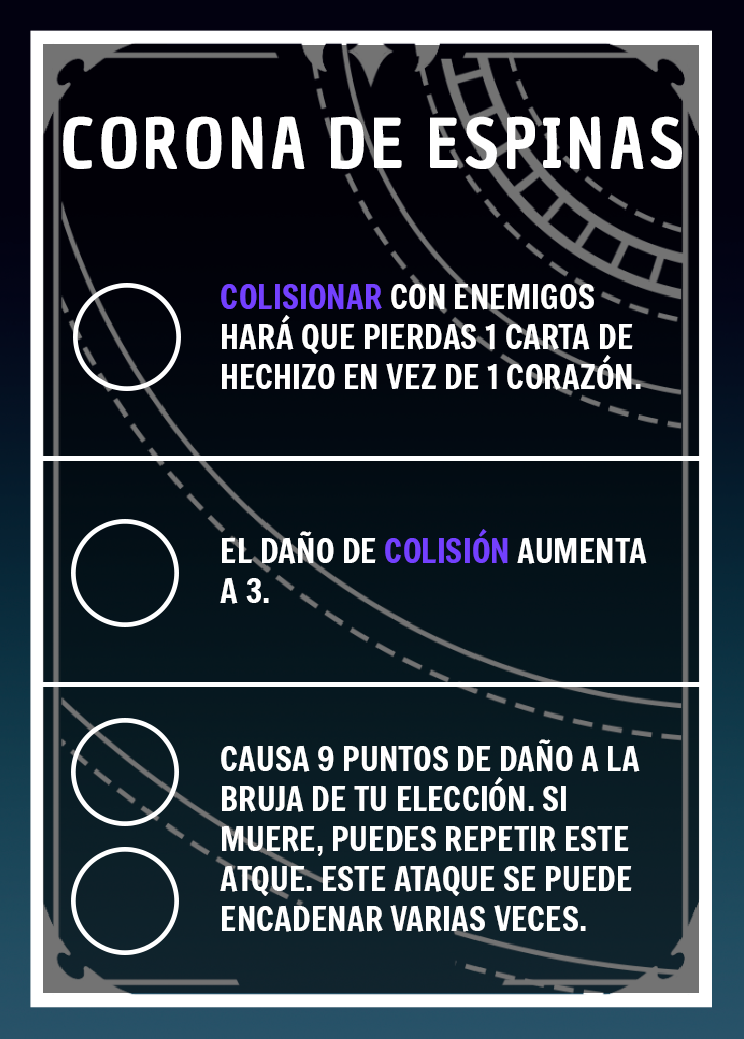
<style>
.page{position:relative;width:744px;height:1039px}
.page>*{position:absolute;margin:0}
.t1{font:66.7px "ChauPhilomeneOne-Regular";letter-spacing:0.075em;color:#ffffff}
.t2{font:33.3px "Freeman-Regular";color:#ffffff}
.t3{font:33.3px "Freeman-Regular";color:#7340ff}
</style>
<div class="page">
<p class="t1" style="left:63px;top:116px;width:619px;height:53px">CORONA DE ESPINAS</p>
<p class="t2" style="left:221px;top:283px;width:420px;height:107px"><span class="t3">COLISIONAR</span> CON ENEMIGOS HARÁ QUE PIERDAS 1 CARTA DE HECHIZO EN VEZ DE 1 CORAZÓN.</p>
<p class="t2" style="left:220px;top:529px;width:427px;height:75px">EL DAÑO DE <span class="t3">COLISIÓN </span>AUMENTA A 3.</p>
<p class="t2" style="left:220px;top:739px;width:420px;height:193px">CAUSA 9 PUNTOS DE DAÑO A LA BRUJA DE TU ELECCIÓN. SI MUERE, PUEDES REPETIR ESTE ATQUE. ESTE ATAQUE SE PUEDE ENCADENAR VARIAS VECES.</p>
</div>
